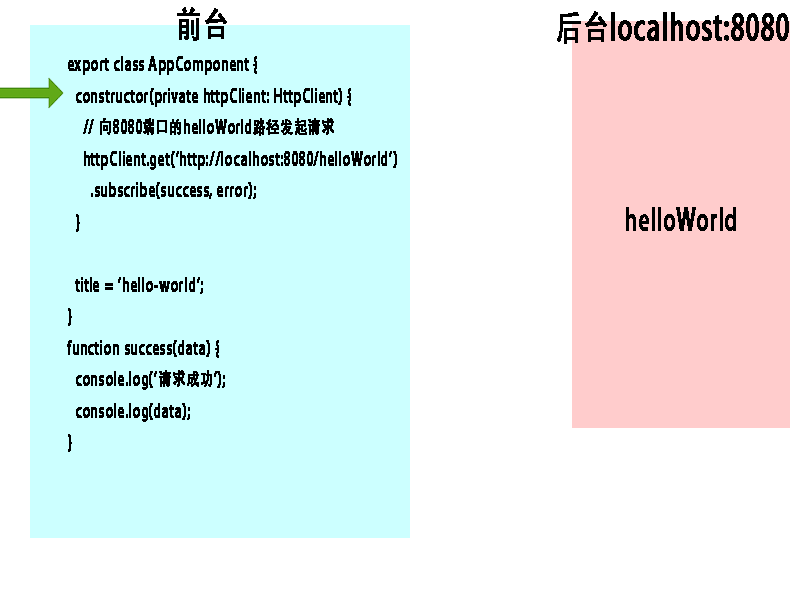
<style>
.page{position:relative;width:800px;height:600px;background:#ffffff}
.page>*{position:absolute;margin:0}
.t1{font:34.9px "AdobeHeitiStd-Regular";letter-spacing:0.005em;color:#000000;font-weight:bold;scale:0.72 1}
.t2{font:17.5px "AdobeHeitiStd-Regular";letter-spacing:0.005em;color:#000000;font-weight:bold;scale:0.72 1}
.t3{font:29.1px "AdobeHeitiStd-Regular";letter-spacing:0.005em;color:#000000;font-weight:bold;scale:0.72 1}
</style>
<div class="page">
<p class="t1" style="left:177px;top:7px;width:50px;height:34px">前台</p>
<p class="t1" style="left:557px;top:11px;width:232px;height:33px">后台localhost:8080</p>
<p class="t2" style="left:67px;top:56px;width:330px;height:396px">export class AppComponent {<br>  constructor(private httpClient: HttpClient) {<br>    // 向8080端口的helloWorld路径发起请求<br>    httpClient.get('http://localhost:8080/helloWorld')  <br>      .subscribe(success, error); <br>  }<br><br>  title = 'hello-world';<br>}<br>function success(data) { <br>  console.log('请求成功');<br>  console.log(data);<br>}</p>
<p class="t3" style="left:626px;top:207px;width:110px;height:24px">helloWorld</p>
</div>
